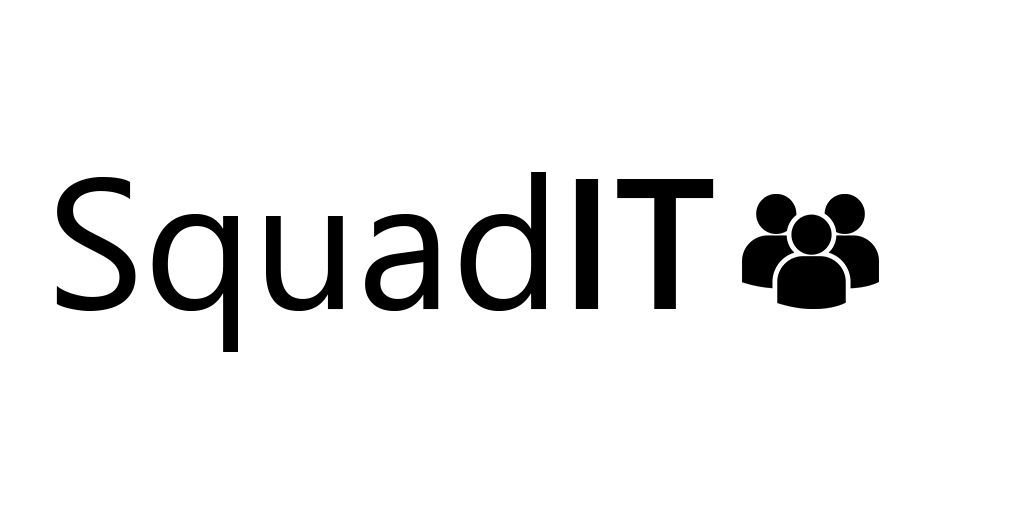
<style>
.page{position:relative;width:1024px;height:512px;background:#ffffff}
.page>*{position:absolute;margin:0}
.t1{font:185px "SegoeUI";color:#000000}
.t2{font:185px "SegoeUI-SemiBold";color:#000000}
</style>
<div class="page">
<p class="t1" style="left:56px;top:172px;width:658px;height:180px">Squad<span class="t2">IT</span></p>
</div>
